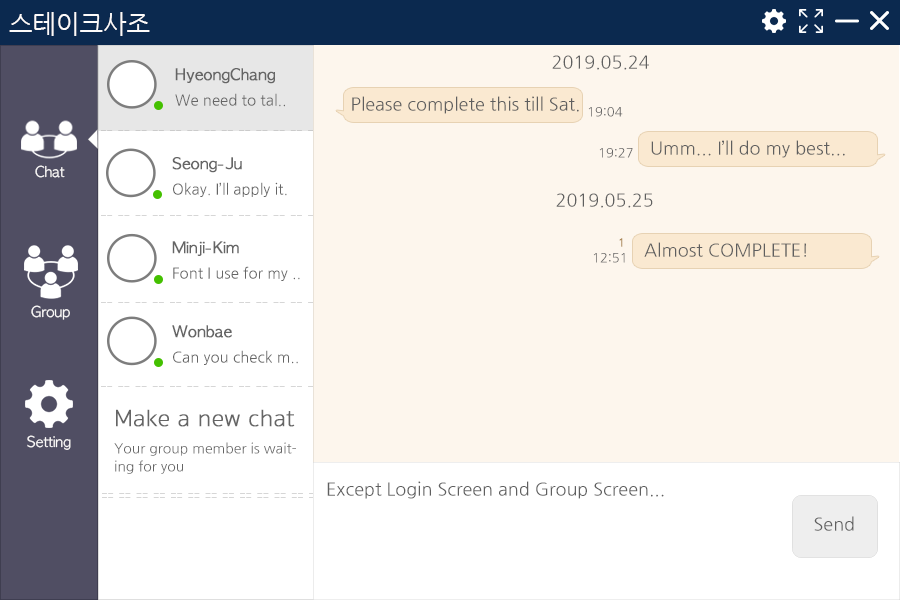
<style>
.page{position:relative;width:900px;height:600px;background:#fdf6ed}
.page>*{position:absolute;margin:0}
.t1{font:25px "NanumGothic";color:#fcfafa}
.t2{font:18px "NanumGothic";color:#5f5f5f}
.t3{font:15px/8px "NanumGothic";color:#656565}
.t4{font:15px/18px "AppleGothic";color:#656565;font-weight:bold}
.t5{font:13px "NanumGothic";color:#5f5f5f}
.t6{font:15px/14px "NanumGothic";color:#656565}
.t7{font:14px "AppleGothic";color:#fcfafa}
.t8{font:11px "NanumGothic";color:#a7824d;font-weight:bold}
.t9{font:13px "NanumGothic"}
.t10{font:14px/18px "NanumGothic";color:#656565}
.t11{font:24px/18px "SukhumvitSet-Thin";color:#656565;font-weight:bold}
</style>
<div class="page">
<p class="t1" style="left:9px;top:12px;width:141px;height:24px">스테이크사조</p>
<p class="t2" style="left:552px;top:55px;width:97px;height:15px">2019.05.24</p>
<p class="t3" style="left:175px;top:68px;width:110px;height:39px"><span class="t4">HyeongChang<br></span><br>We need to tal..</p>
<p class="t2" style="left:352px;top:96px;width:227px;height:18px">Please complete this till Sat.</p>
<p class="t5" style="left:588px;top:107px;width:35px;height:10px">19:04</p>
<p class="t5" style="left:599px;top:148px;width:34px;height:10px">19:27</p>
<p class="t2" style="left:651px;top:140px;width:194px;height:18px">Umm... I’ll do my best...</p>
<p class="t6" style="left:172px;top:157px;width:115px;height:40px"><span class="t4">Seong-Ju<br><br></span>Okay. I’ll apply it.</p>
<p class="t7" style="left:35px;top:165px;width:30px;height:13px">Chat</p>
<p class="t2" style="left:556px;top:193px;width:97px;height:15px">2019.05.25</p>
<p class="t6" style="left:172px;top:241px;width:128px;height:40px"><span class="t4">Minji-Kim<br><br></span>Font I use for my ..</p>
<p class="t8" style="left:619px;top:238px;width:4px;height:9px">1</p>
<p class="t2" style="left:644px;top:242px;width:162px;height:15px">Almost COMPLETE!</p>
<p class="t9" style="left:593px;top:253px;width:32px;height:10px">12:51</p>
<p class="t7" style="left:31px;top:305px;width:39px;height:15px">Group</p>
<p class="t6" style="left:172px;top:325px;width:126px;height:40px"><span class="t4">Wonbae<br><br></span>Can you check m..</p>
<p class="t10" style="left:114px;top:409px;width:182px;height:65px"><span class="t11">Make a new chat<br><br></span>Your group member is wait-<br>ing for you</p>
<p class="t7" style="left:27px;top:435px;width:44px;height:15px">Setting</p>
<p class="t2" style="left:327px;top:481px;width:337px;height:18px">Except Login Screen and Group Screen...</p>
<p class="t2" style="left:814px;top:516px;width:40px;height:15px">Send</p>
</div>
